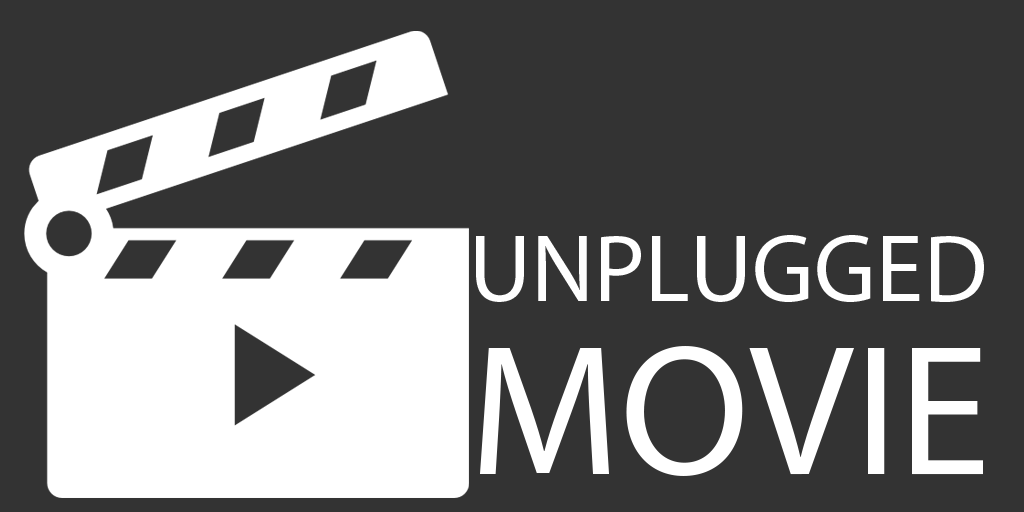
<style>
.page{position:relative;width:1024px;height:512px;background:#333333}
.page>*{position:absolute;margin:0}
.t1{font:95.9px/95.9px "MyriadPro-Regular";color:#ffffff}
.t2{font:187.5px/95.9px "MyriadPro-Regular";color:#ffffff}
</style>
<div class="page">
<p class="t1" style="left:476px;top:235px;width:508px;height:241px">UNPLUGGED<br><span class="t2">MOVIE</span></p>
</div>
